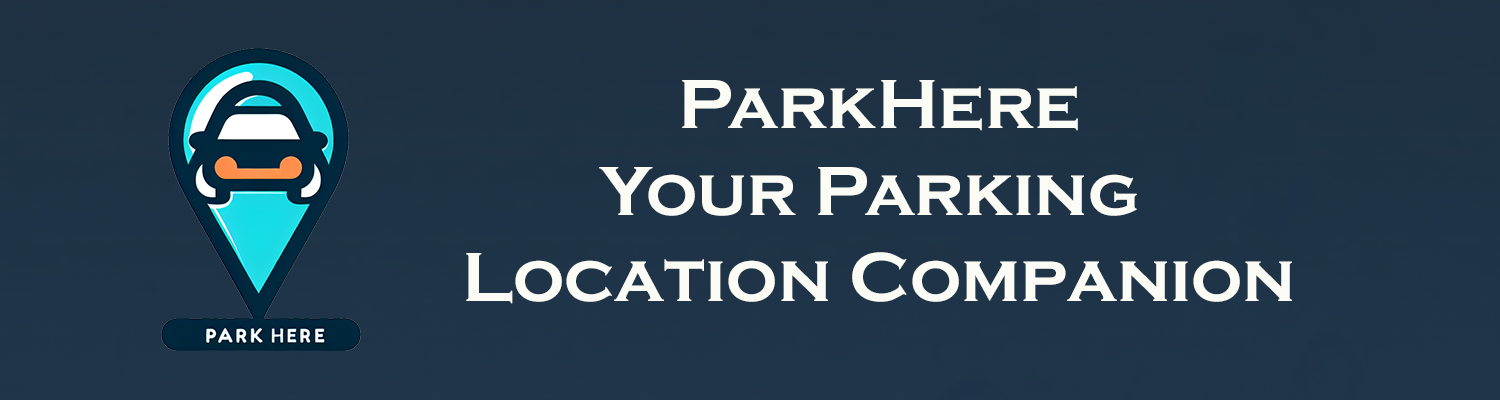
<style>
.page{position:relative;width:1500px;height:400px}
.page>*{position:absolute;margin:0}
.t1{font:72px "CopperplateGothic-Bold";color:#fcfcf7}
</style>
<div class="page">
<p class="t1" style="left:466px;top:80px;width:826px;height:224px;text-align:center">ParkHere<br>Your Parking <br>Location Companion</p>
</div>
